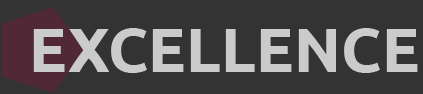
<style>
.page{position:relative;width:423px;height:94px;background:#333333}
.page>*{position:absolute;margin:0}
.t1{font:62.5px "Ubuntu-Bold";color:#cbcbcb}
</style>
<div class="page">
<p class="t1" style="left:33px;top:28px;width:385px;height:45px">EXCELLENCE</p>
</div>
